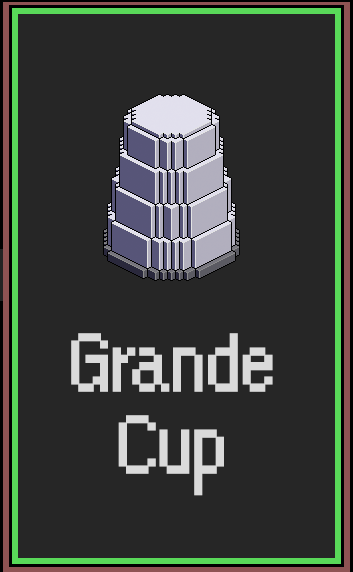
<style>
.page{position:relative;width:353px;height:572px;background:#262626}
.page>*{position:absolute;margin:0}
.t1{font:90px/82px "OrangeKid";letter-spacing:-0.01em;color:#dadada}
</style>
<div class="page">
<p class="t1" style="left:71px;top:333px;width:202px;height:163px;text-align:center">Grande<br>Cup</p>
</div>
